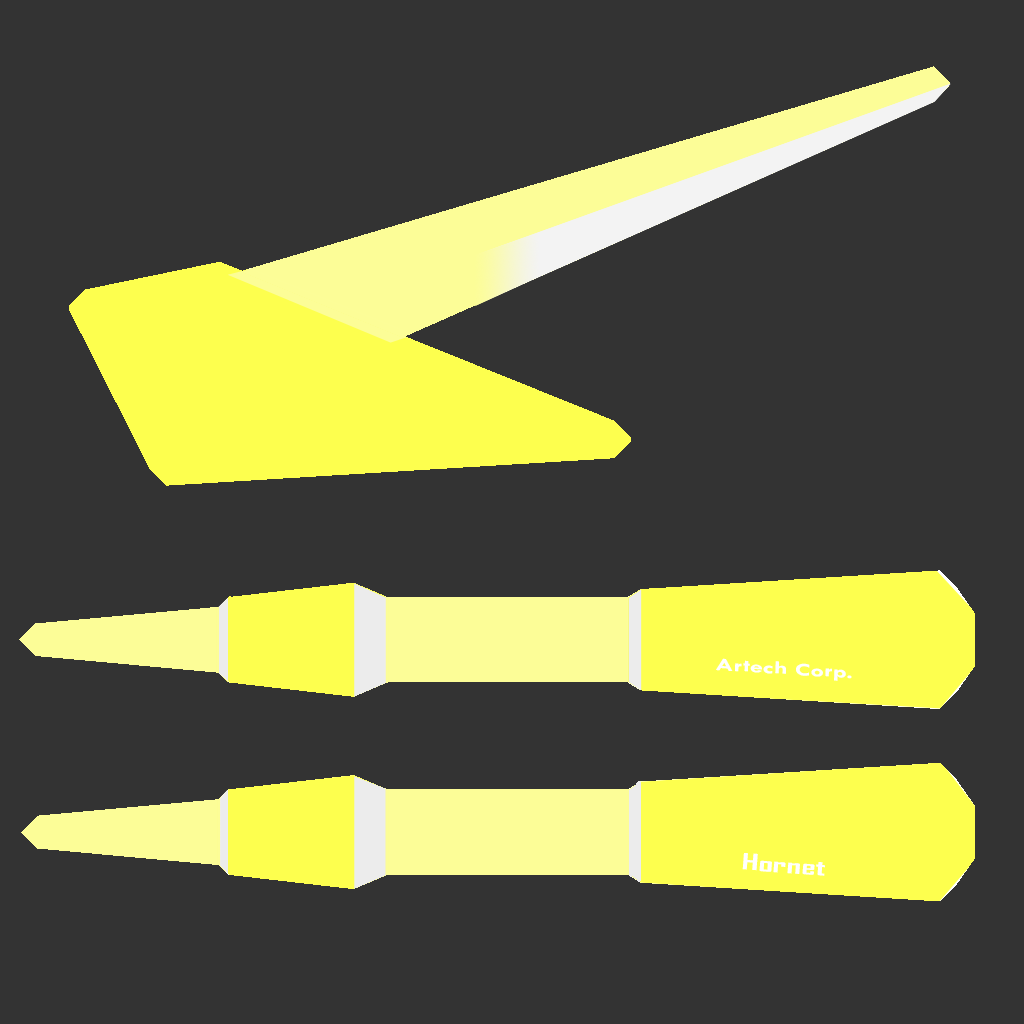
<style>
.page{position:relative;width:1024px;height:1024px;background:#333333}
.page>*{position:absolute;margin:0}
.t1{font:18.2px "TwCenMT-Bold";color:#ffffff;scale:1.46 1}
.t2{font:21.2px "AgencyFB-Bold";color:#ffffff;scale:1.7 1}
</style>
<div class="page">
<p class="t1" style="left:716px;top:658px;width:136px;height:23px;rotate:4deg">Artech Corp.</p>
<p class="t2" style="left:742px;top:853px;width:83px;height:23px;rotate:4deg">Hornet</p>
</div>
